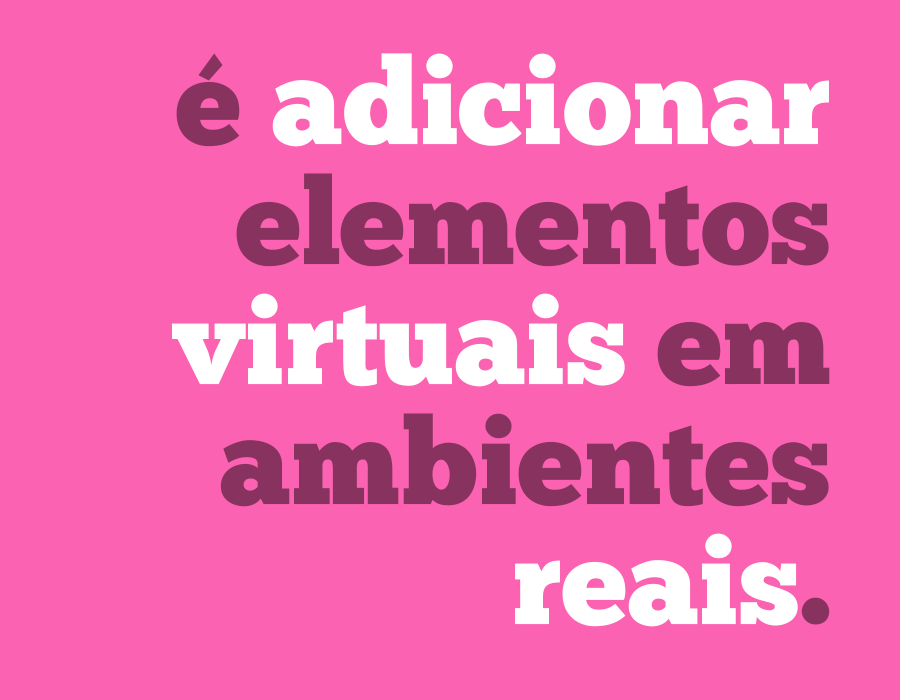
<style>
.page{position:relative;width:900px;height:700px;background:#fc62b2}
.page>*{position:absolute;margin:0}
.t1{font:120.7px/120px "ChunkFive-Roman";color:#88335f}
.t2{font:120.7px/120px "ChunkFive-Roman";color:#ffffff}
</style>
<div class="page">
<p class="t1" style="left:172px;top:53px;width:658px;height:574px;text-align:right">é <span class="t2">adicionar<br></span>elementos<br><span class="t2">virtuais</span> em<br>ambientes<br><span class="t2">reais</span>.</p>
</div>
